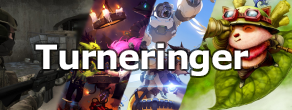
<style>
.page{position:relative;width:292px;height:110px}
.page>*{position:absolute;margin:0}
.t1{font:33.4px "Verdana-Bold";letter-spacing:-0.025em;color:#ffffff}
</style>
<div class="page">
<p class="t1" style="left:35px;top:43px;width:213px;height:33px">Turneringer</p>
</div>
